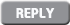
<style>
.page{position:relative;width:70px;height:25px;background:#919296}
.page>*{position:absolute;margin:0}
.t1{font:11px "HeadlineR-HM";letter-spacing:-0.02em;color:#f9fafc}
</style>
<div class="page">
<p class="t1" style="left:16px;top:8px;width:39px;height:10px">REPLY</p>
</div>
